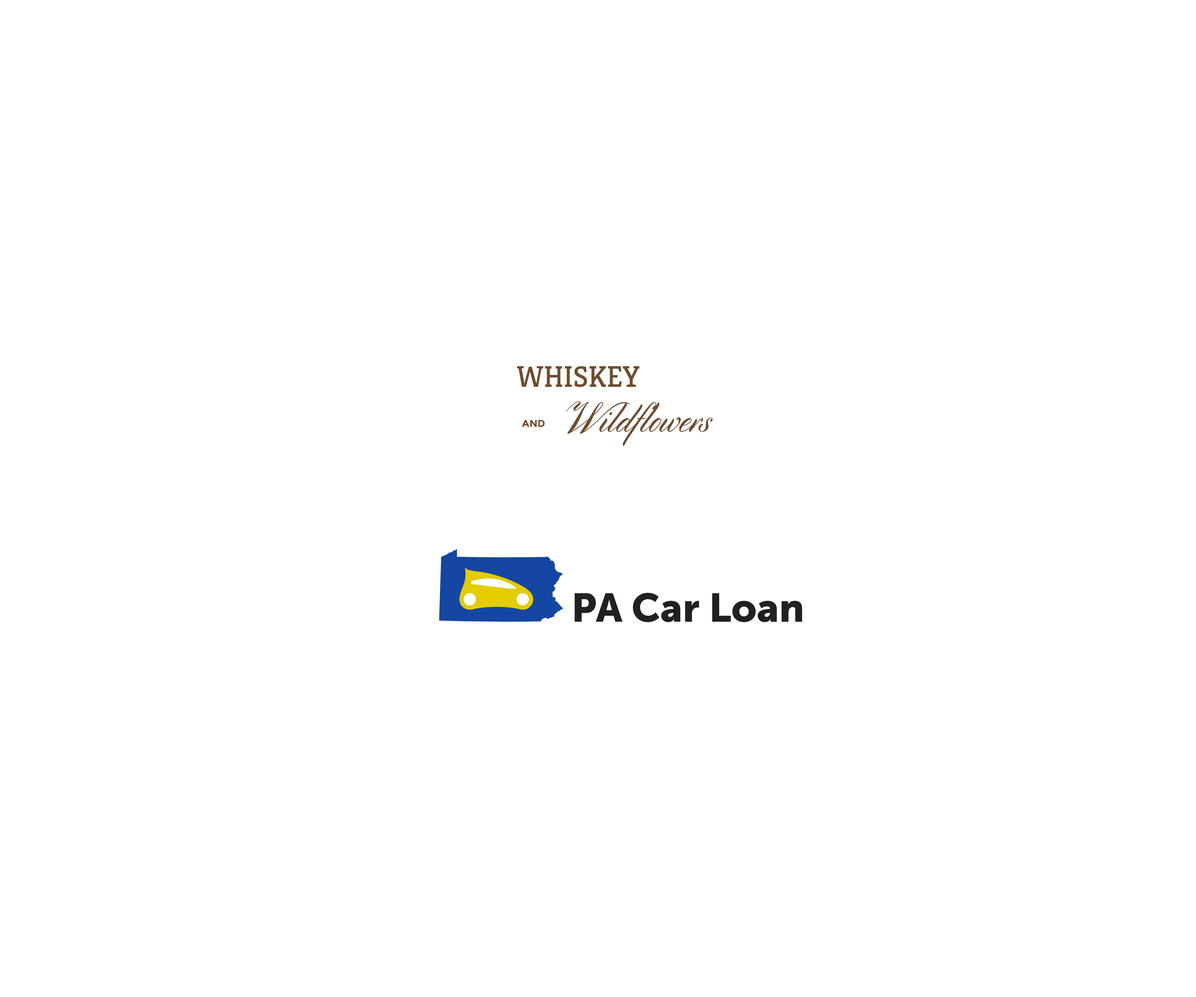
<style>
.page{position:relative;width:1196px;height:997px;background:#ffffff}
.page>*{position:absolute;margin:0}
.t1{font:29.9px "Kreon-Regular";color:#6f4c2e}
.t2{font:49.8px "Cylburn-Regular";color:#6f4c2e}
.t3{font:10px "Montserrat-Bold";color:#6f4c2e;text-transform:uppercase}
.t4{font:39.9px "MuseoSans-900";color:#242020}
</style>
<div class="page">
<p class="t1" style="left:517px;top:366px;width:123px;height:21px">WHISKEY</p>
<p class="t2" style="left:566px;top:401px;width:147px;height:45px">Wildflowers</p>
<p class="t3" style="left:522px;top:420px;width:23px;height:7px">and</p>
<p class="t4" style="left:575px;top:593px;width:227px;height:29px">PA Car Loan</p>
</div>
